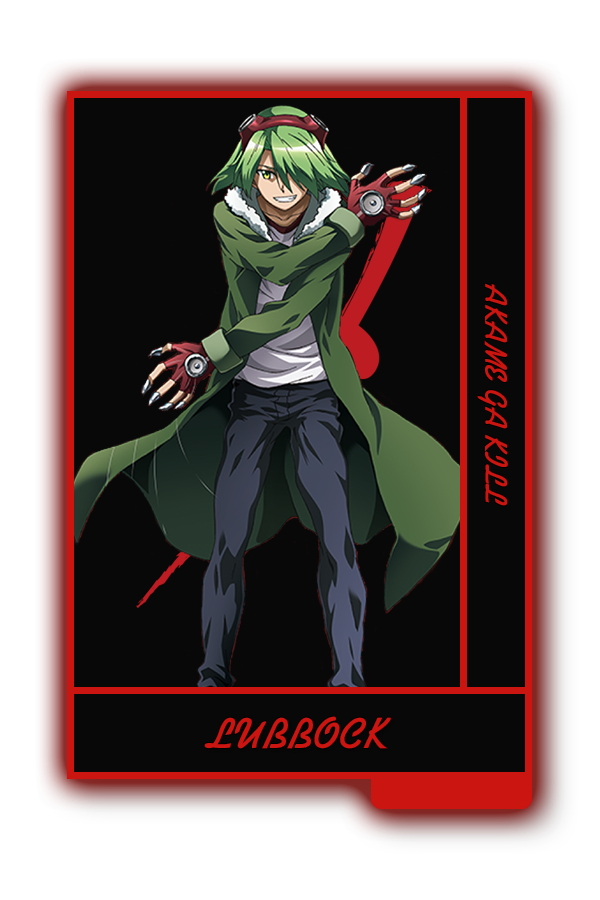
<style>
.page{position:relative;width:600px;height:900px;background:#080808}
.page>*{position:absolute;margin:0}
.t1{font:31.2px "Alako-Bold";color:#cb1511}
.t2{font:43.2px "Alako-Bold";color:#cb1511}
</style>
<div class="page">
<p class="t1" style="left:477px;top:283px;width:31px;height:223px;rotate:90deg">AKAME GA KILL</p>
<p class="t2" style="left:204px;top:716px;width:187px;height:33px">LUBBOCK</p>
</div>
